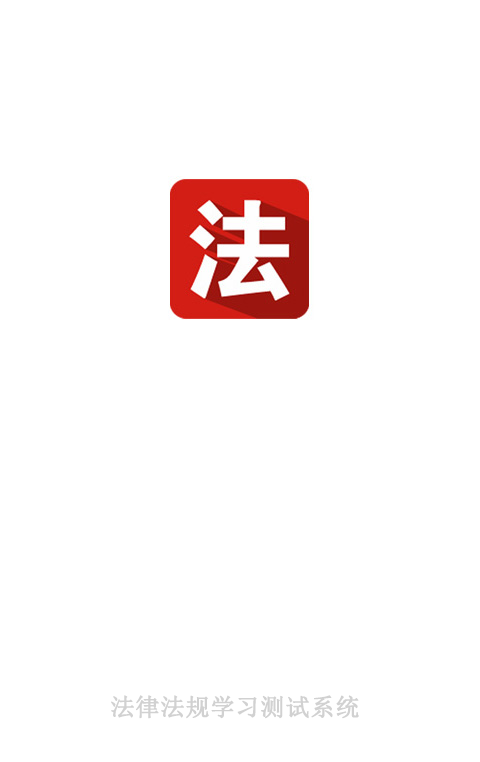
<style>
.page{position:relative;width:480px;height:762px;background:#ffffff}
.page>*{position:absolute;margin:0}
.t1{font:24px "SimSun";color:#d1d1d1;font-weight:bold}
</style>
<div class="page">
<p class="t1" style="left:111px;top:695px;width:248px;height:24px">法律法规学习测试系统</p>
</div>
